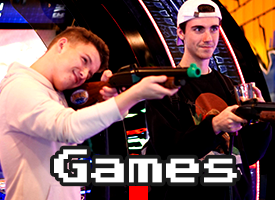
<style>
.page{position:relative;width:275px;height:200px;background:#000000}
.page>*{position:absolute;margin:0}
.t1{font:37.5px "PressStart2P";color:#ffffff}
</style>
<div class="page">
<p class="t1" style="left:54px;top:149px;width:183px;height:34px">Games</p>
</div>
